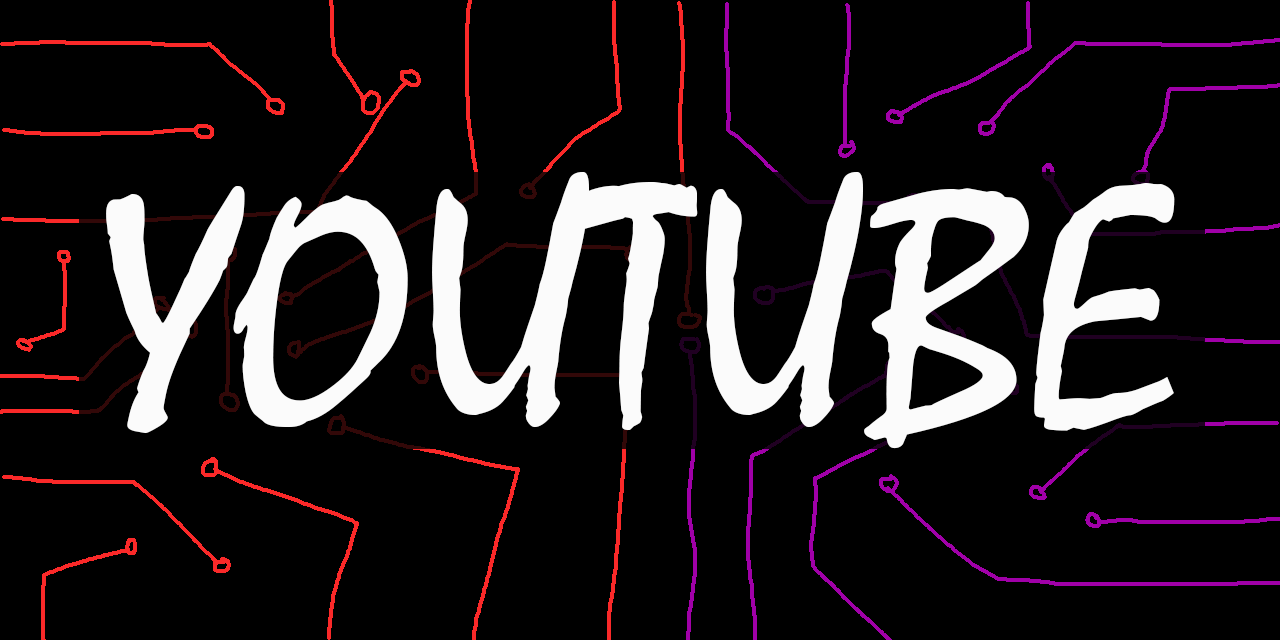
<style>
.page{position:relative;width:1280px;height:640px;background:#000000}
.page>*{position:absolute;margin:0}
.t1{font:350px "Mistral";color:#fbfbfb}
</style>
<div class="page">
<p class="t1" style="left:106px;top:172px;width:1069px;height:277px">YOUTUBE</p>
</div>
